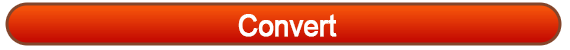
<style>
.page{position:relative;width:570px;height:50px}
.page>*{position:absolute;margin:0}
.t1{font:30.6px "ArialMT";letter-spacing:-0.025em;color:#ffffff;font-weight:bold;scale:0.91 1}
</style>
<div class="page">
<p class="t1" style="left:238px;top:14px;width:99px;height:23px">Convert</p>
</div>
